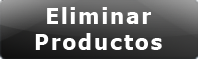
<style>
.page{position:relative;width:198px;height:59px}
.page>*{position:absolute;margin:0}
.t1{font:22.1px "Tahoma-Bold";letter-spacing:0.08em;color:#ffffff}
</style>
<div class="page">
<p class="t1" style="left:35px;top:7px;width:127px;height:43px;text-align:center">Eliminar<br>Productos</p>
</div>
